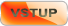
<style>
.page{position:relative;width:68px;height:26px}
.page>*{position:absolute;margin:0}
.t1{font:11.2px "Arial-BoldMT";letter-spacing:0.005em;scale:1.25 1}
</style>
<div class="page">
<p class="t1" style="left:10px;top:8px;width:47px;height:9px">VSTUP</p>
</div>
